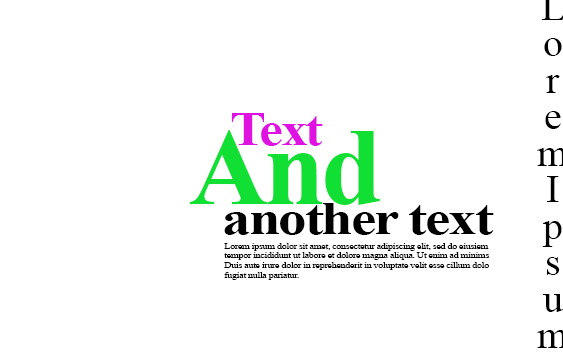
<style>
.page{position:relative;width:563px;height:353px;background:#ffffff}
.page>*{position:absolute;margin:0}
.t1{font:48px "TimesNewRomanPS-BoldMT";letter-spacing:-0.04em;color:#de13e1;scale:1.12 1}
.t2{font:48px "TimesNewRomanPS-BoldMT";letter-spacing:-0.04em;color:#de13e1;text-transform:uppercase;scale:1.12 1}
.t3{font:110px "TimesNewRomanPS-BoldMT";letter-spacing:-0.04em;color:#11df34}
.t4{font:110px "TimesNewRomanPS-BoldMT";letter-spacing:-0.04em;color:#11df34;text-transform:uppercase}
.t5{font:47px "TimesNewRomanPS-BoldMT";letter-spacing:-0.04em;color:#000000;scale:1.22 1}
.t6{font:8px "TimesNewRomanPSMT";letter-spacing:-0.04em;color:#000000;scale:1.29 1}
</style>
<div class="page">
<p class="t1" style="left:231px;top:113px;width:92px;height:33px"><span class="t2">T</span>ext</p>
<p class="t3" style="left:189px;top:130px;width:191px;height:75px"><span class="t4">A</span>nd</p>
<p class="t5" style="left:224px;top:203px;width:270px;height:32px">another text</p>
<p class="t6" style="left:224px;top:243px;width:266px;height:37px">Lorem ipsum dolor sit amet, consectetur adipiscing elit, sed do eiusiem<br>tempor incididunt ut labore et dolore magna aliqua. Ut enim ad minims<br>Duis aute irure dolor in reprehenderit in voluptate velit esse cillum dolo<br>fugiat nulla pariatur.</p>
</div>
